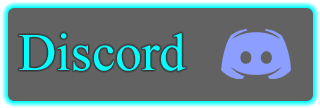
<style>
.page{position:relative;width:320px;height:108px;background:#626262}
.page>*{position:absolute;margin:0}
.t1{font:52.7px "TimesNewRomanPSMT";color:#00ffff}
</style>
<div class="page">
<p class="t1" style="left:19px;top:33px;width:167px;height:38px">Discord</p>
</div>
